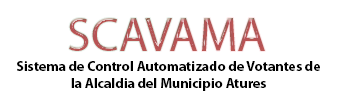
<style>
.page{position:relative;width:340px;height:103px;background:#ffffff}
.page>*{position:absolute;margin:0}
.t1{font:48px "MyriadPro-Regular";color:#b85656}
.t2{font:14px "MyriadPro-Bold";color:#000000}
</style>
<div class="page">
<p class="t1" style="left:69px;top:18px;width:196px;height:33px">SCAVAMA</p>
<p class="t2" style="left:17px;top:61px;width:303px;height:30px;text-align:center">Sistema de Control Automatizado de Votantes de la Alcaldia del Municipio Atures</p>
</div>
